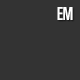
<style>
.page{position:relative;width:80px;height:80px;background:#333333}
.page>*{position:absolute;margin:0}
.t1{font:18px "UniversLTStd-UltraCn";color:#ffffff}
</style>
<div class="page">
<p class="t1" style="left:57px;top:7px;width:16px;height:13px">EM</p>
</div>
